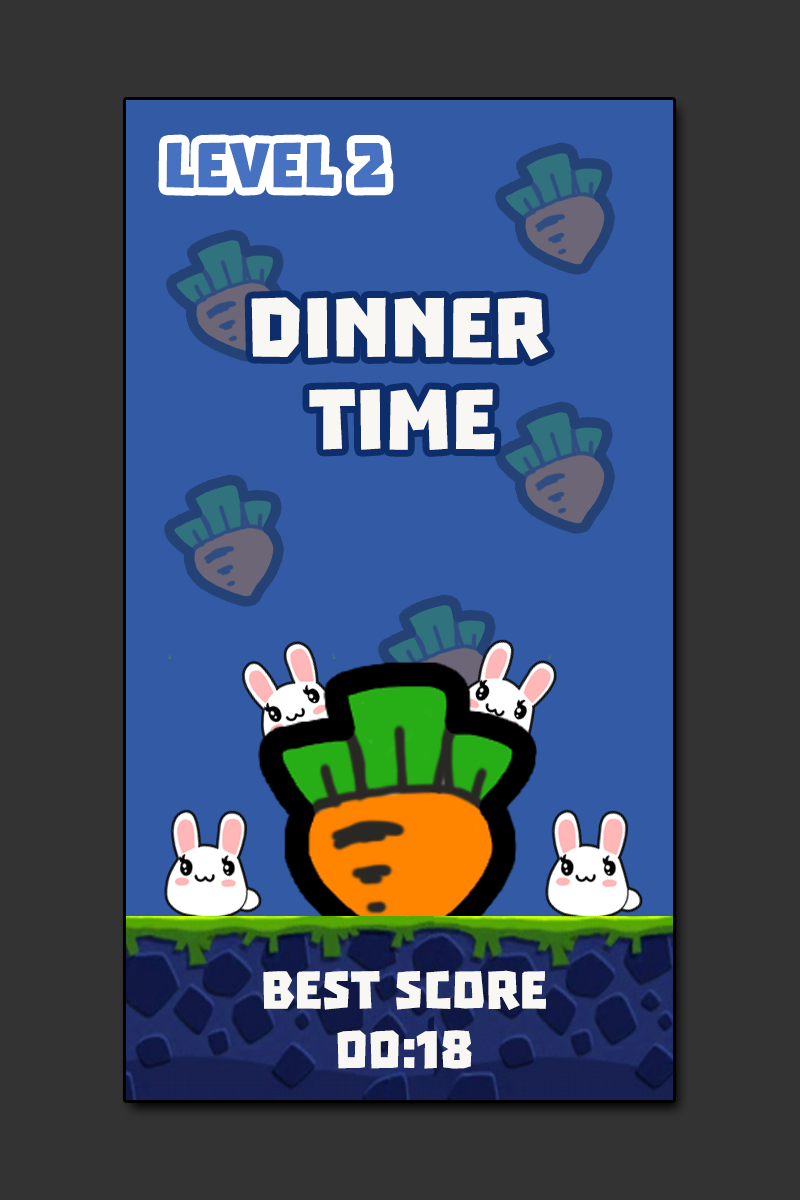
<style>
.page{position:relative;width:800px;height:1200px;background:#333333}
.page>*{position:absolute;margin:0}
.t1{font:72px "Troika";color:#4772c1;text-transform:uppercase}
.t2{font:96px "Troika";color:#f8f7f4;text-transform:uppercase}
.t3{font:60px "Troika";color:#f8f7f4;text-transform:uppercase}
</style>
<div class="page">
<p class="t1" style="left:166px;top:142px;width:220px;height:46px">level 2</p>
<p class="t2" style="left:251px;top:297px;width:297px;height:63px">dinner</p>
<p class="t2" style="left:309px;top:389px;width:186px;height:61px">time</p>
<p class="t3" style="left:263px;top:970px;width:283px;height:40px">best score</p>
<p class="t3" style="left:337px;top:1030px;width:135px;height:39px">00:18</p>
</div>
